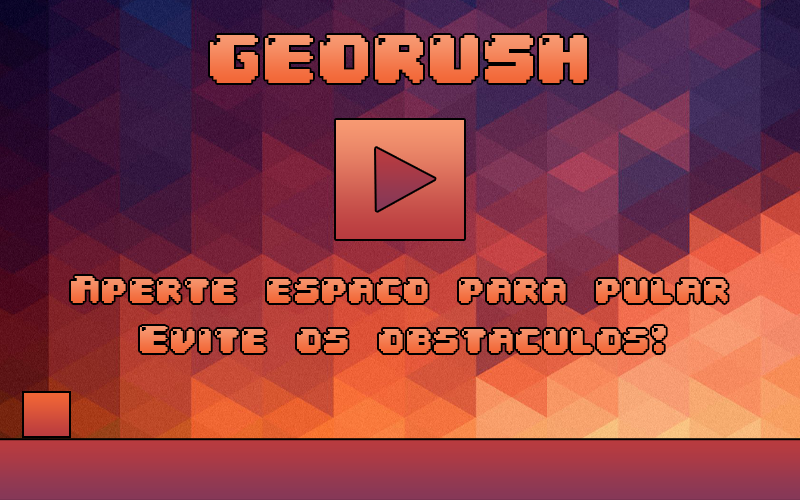
<style>
.page{position:relative;width:800px;height:500px}
.page>*{position:absolute;margin:0}
.t1{font:58.3px "04b30"}
.t2{font:33.3px "04b30"}
</style>
<div class="page">
<p class="t1" style="left:210px;top:35px;width:377px;height:48px">GEORUSH</p>
<p class="t2" style="left:71px;top:276px;width:657px;height:27px">Aperte espaco para pular</p>
<p class="t2" style="left:140px;top:326px;width:526px;height:27px">Evite os obstaculos!</p>
</div>
